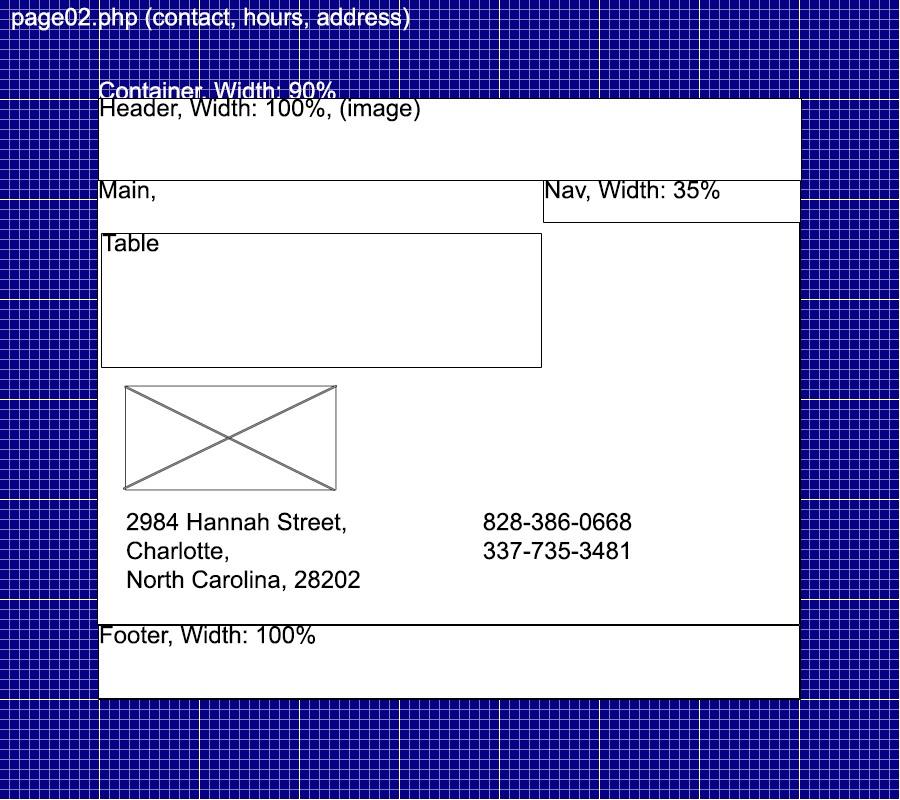
<style>
.page{position:relative;width:900px;height:800px;background:#ffffff}
.page>*{position:absolute;margin:0}
.t1{font:24px "ArialMT";color:#ffffff}
.t2{font:24px "ArialMT";color:#000000}
</style>
<div class="page">
<p class="t1" style="left:12px;top:7px;width:398px;height:24px">page02.php (contact, hours, address)</p>
<p class="t1" style="left:99px;top:81px;width:237px;height:22px">Container, Width: 90%</p>
<p class="t2" style="left:100px;top:98px;width:320px;height:24px">Header, Width: 100%, (image)</p>
<p class="t2" style="left:99px;top:181px;width:56px;height:21px">Main,</p>
<p class="t2" style="left:545px;top:180px;width:175px;height:22px">Nav, Width: 35%</p>
<p class="t2" style="left:102px;top:234px;width:57px;height:18px">Table</p>
<p class="t2" style="left:126px;top:512px;width:234px;height:80px">2984 Hannah Street,<br>Charlotte,<br>North Carolina, 28202</p>
<p class="t2" style="left:483px;top:512px;width:149px;height:48px;text-align:center">828-386-0668<br>337-735-3481</p>
<p class="t2" style="left:100px;top:625px;width:215px;height:22px">Footer, Width: 100%</p>
</div>
